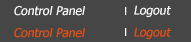
<style>
.page{position:relative;width:191px;height:42px;background:#464646}
.page>*{position:absolute;margin:0}
.t1{font:12px "Tahoma";letter-spacing:0.005em;color:#fefefe;font-style:italic}
.t2{font:12px "Tahoma";letter-spacing:0.005em;color:#fffefe;font-style:italic}
.t3{font:12px "Tahoma";letter-spacing:0.005em;color:#e75208;font-style:italic}
</style>
<div class="page">
<p class="t1" style="left:14px;top:6px;width:71px;height:10px">Control Panel</p>
<p class="t2" style="left:134px;top:5px;width:37px;height:12px">Logout</p>
<p class="t3" style="left:14px;top:28px;width:71px;height:10px">Control Panel</p>
<p class="t3" style="left:134px;top:27px;width:37px;height:12px">Logout</p>
</div>
